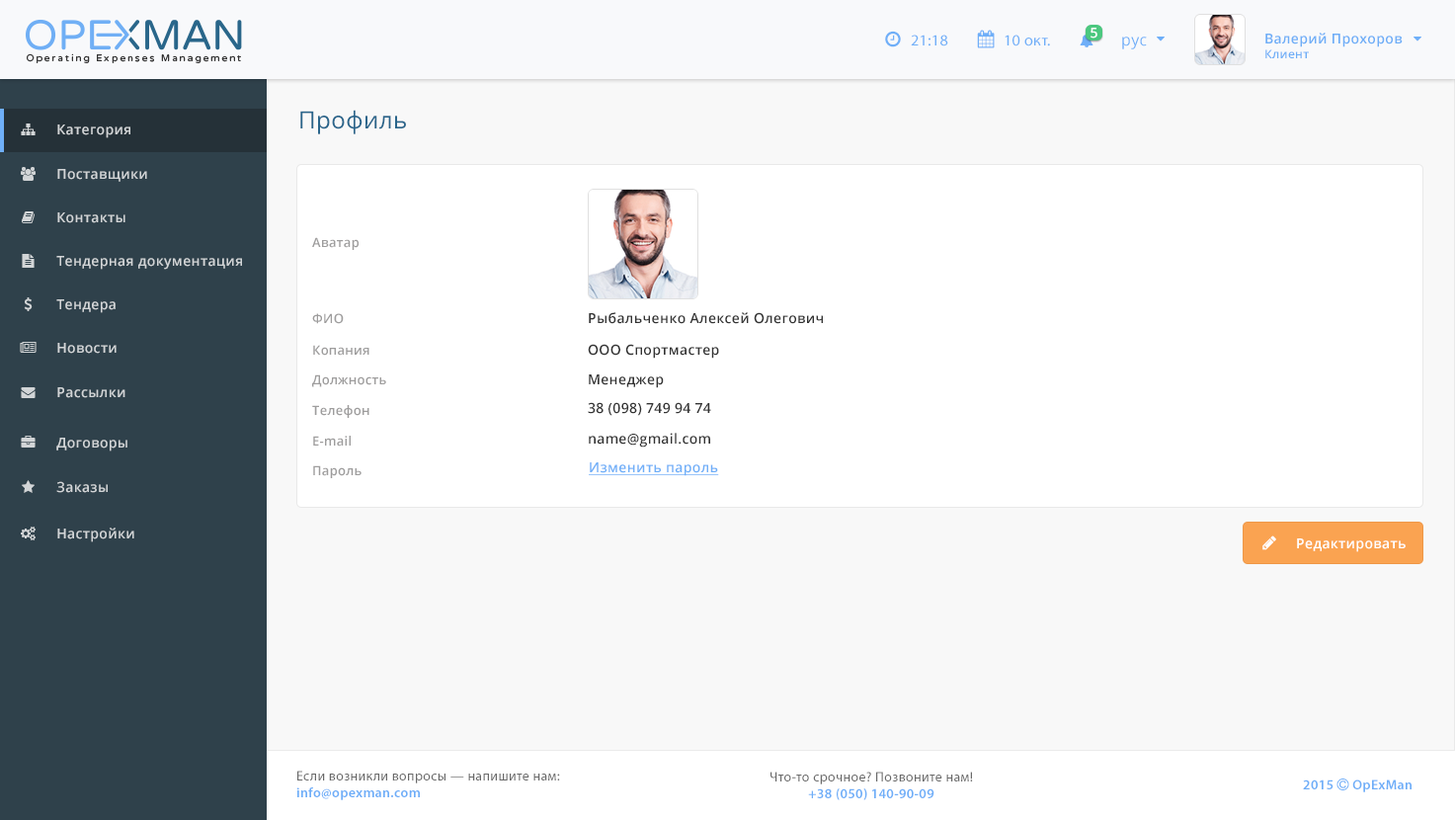
<style>
.page{position:relative;width:1455px;height:820px;background:#ffffff}
.page>*{position:absolute;margin:0}
.t1{font:13.8px "OpenSans-Semibold";letter-spacing:0.025em;color:#ffffff}
.t2{font:15.7px "MyriadPro-Regular";letter-spacing:0.025em;color:#6faff8}
.t3{font:15.7px "OpenSans";letter-spacing:0.025em;color:#6eaff8}
.t4{font:13.8px "OpenSans-Semibold";letter-spacing:0.025em;color:#6eaef7}
.t5{font:11.8px "OpenSans-Semibold";letter-spacing:0.025em;color:#6eaef7}
.t6{font:23.6px "OpenSans";letter-spacing:0.025em;color:#29658b}
.t7{font:13.8px "OpenSans-Semibold";letter-spacing:0.025em;color:#d2d5d7}
.t8{font:12.8px "OpenSans-Semibold";letter-spacing:0.025em;color:#9e9d9d}
.t9{font:13.8px "OpenSans-Semibold";letter-spacing:0.025em;color:#333333}
.t10{font:13.8px "OpenSans-Semibold";letter-spacing:0.025em;color:#6faff8;text-decoration:underline}
.t11{font:13.8px "MyriadPro-Regular";letter-spacing:0.025em;color:#696969}
.t12{font:13.8px "MyriadPro-Semibold";letter-spacing:0.025em;color:#6eaef8}
</style>
<div class="page">
<p class="t1" style="left:1090px;top:28px;width:7px;height:11px">5</p>
<p class="t2" style="left:911px;top:35px;width:37px;height:11px">21:18</p>
<p class="t2" style="left:1004px;top:35px;width:46px;height:11px">10 окт.</p>
<p class="t3" style="left:1122px;top:37px;width:25px;height:12px">рус</p>
<p class="t4" style="left:1265px;top:33px;width:137px;height:25px">Валерий Прохоров<br><span class="t5">Клиент</span></p>
<p class="t6" style="left:300px;top:110px;width:106px;height:24px">Профиль</p>
<p class="t7" style="left:57px;top:124px;width:73px;height:14px">Категория</p>
<p class="t7" style="left:57px;top:169px;width:90px;height:13px">Поставщики</p>
<p class="t7" style="left:57px;top:212px;width:68px;height:11px">Контакты</p>
<p class="t8" style="left:312px;top:237px;width:46px;height:13px">Аватар</p>
<p class="t7" style="left:56px;top:256px;width:186px;height:14px">Тендерная документация</p>
<p class="t7" style="left:56px;top:299px;width:60px;height:14px">Тендера</p>
<p class="t8" style="left:312px;top:313px;width:32px;height:11px">ФИО</p>
<p class="t9" style="left:589px;top:312px;width:234px;height:12px">Рыбальченко Алексей Олегович</p>
<p class="t7" style="left:57px;top:343px;width:60px;height:11px">Новости</p>
<p class="t8" style="left:313px;top:345px;width:56px;height:11px">Копания</p>
<p class="t9" style="left:588px;top:344px;width:131px;height:14px">ООО Спортмастер</p>
<p class="t8" style="left:312px;top:374px;width:74px;height:13px">Должность</p>
<p class="t9" style="left:589px;top:374px;width:75px;height:14px">Менеджер</p>
<p class="t7" style="left:57px;top:387px;width:68px;height:11px">Рассылки</p>
<p class="t9" style="left:588px;top:402px;width:123px;height:14px">38 (098) 749 94 74</p>
<p class="t8" style="left:312px;top:405px;width:57px;height:13px">Телефон</p>
<p class="t7" style="left:56px;top:438px;width:71px;height:13px">Договоры</p>
<p class="t8" style="left:313px;top:436px;width:38px;height:10px">E-mail</p>
<p class="t9" style="left:589px;top:433px;width:121px;height:14px">name@gmail.com</p>
<p class="t8" style="left:313px;top:465px;width:48px;height:13px">Пароль</p>
<p class="t10" style="left:589px;top:462px;width:130px;height:14px">Изменить пароль</p>
<p class="t7" style="left:56px;top:481px;width:52px;height:12px">Заказы</p>
<p class="t7" style="left:57px;top:527px;width:77px;height:15px">Настройки</p>
<p class="t1" style="left:1297px;top:538px;width:108px;height:14px">Редактировать</p>
<p class="t11" style="left:296px;top:770px;width:264px;height:30px">Если возникли вопросы — напишите нам:<br><span class="t12">info@opexman.com</span></p>
<p class="t11" style="left:770px;top:771px;width:203px;height:29px;text-align:center">Что-то срочное? Позвоните нам!<br><span class="t12">+38 (050) 140-90-09</span></p>
</div>
